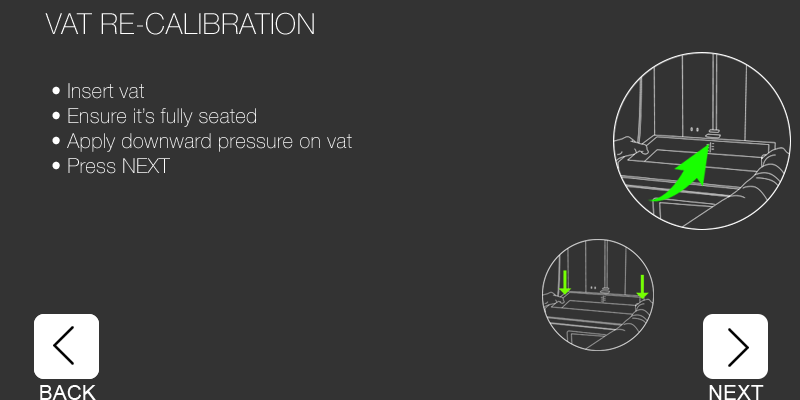
<style>
.page{position:relative;width:800px;height:400px;background:#333333}
.page>*{position:absolute;margin:0}
.t1{font:20.8px "HelveticaNeue-Thin";color:#ffffff}
</style>
<div class="page">
<p class="t1" style="left:52px;top:83px;width:300px;height:91px">• Insert vat<br>• Ensure it’s fully seated<br>• Apply downward pressure on vat<br>• Press NEXT</p>
</div>
